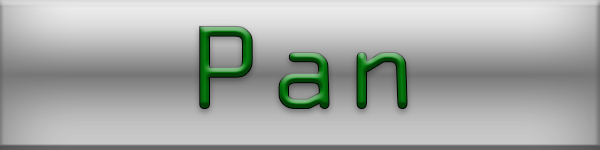
<style>
.page{position:relative;width:600px;height:150px}
.page>*{position:absolute;margin:0}
.t1{font:106.7px "OCRAStd"}
</style>
<div class="page">
<p class="t1" style="left:199px;top:25px;width:209px;height:84px">Pan</p>
</div>
